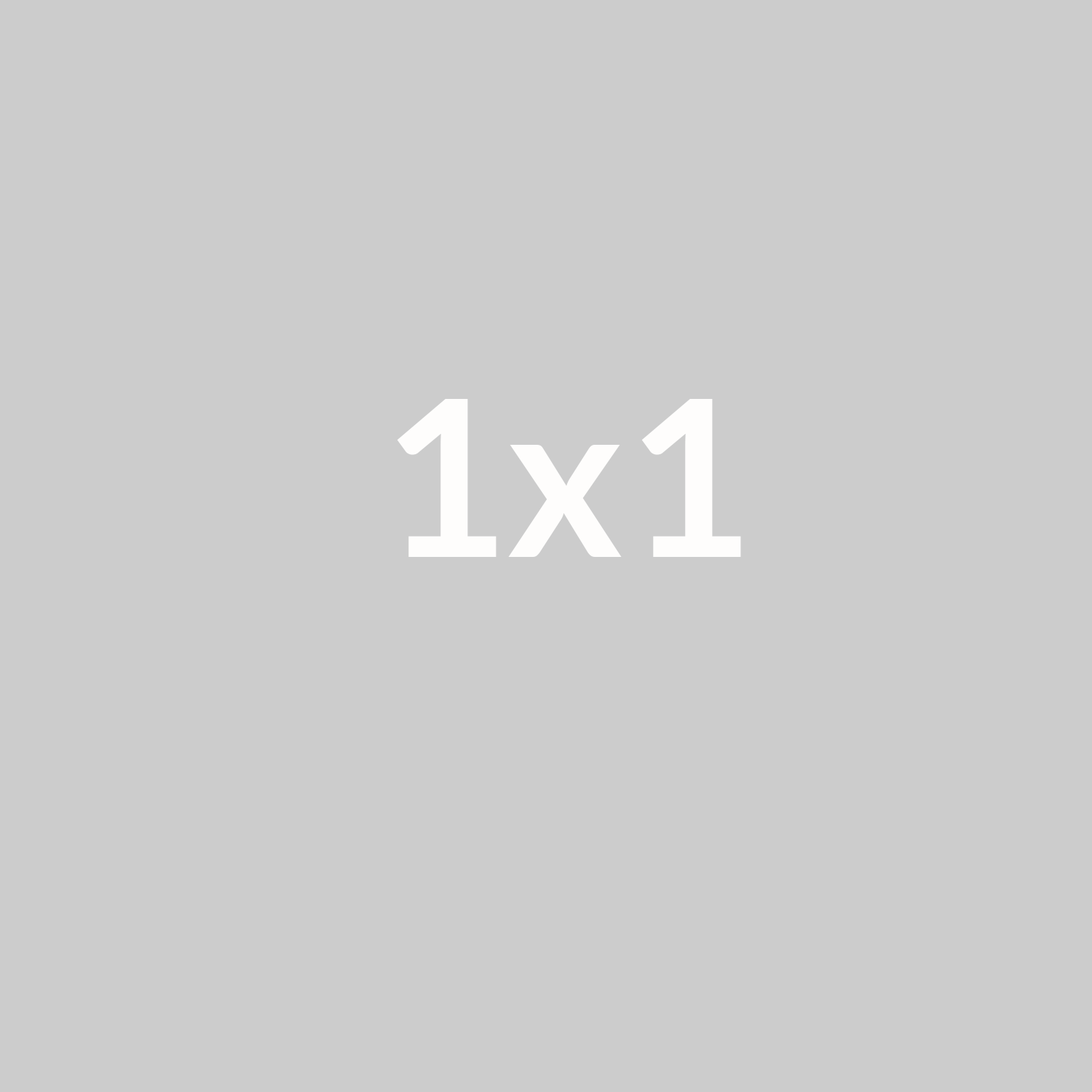
<style>
.page{position:relative;width:1092px;height:1092px;background:#cccccc}
.page>*{position:absolute;margin:0}
.t1{font:218.4px "Lato-Bold";color:#fefdfc}
</style>
<div class="page">
<p class="t1" style="left:397px;top:399px;width:344px;height:158px">1x1</p>
</div>
